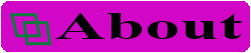
<style>
.page{position:relative;width:251px;height:53px;background:#d206c7}
.page>*{position:absolute;margin:0}
.t1{font:39.1px "TimesNewRomanPS-BoldMT";color:#000000;scale:1.79 1}
</style>
<div class="page">
<p class="t1" style="left:55px;top:13px;width:187px;height:26px">About</p>
</div>
